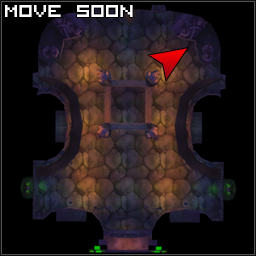
<style>
.page{position:relative;width:256px;height:256px;background:#000000}
.page>*{position:absolute;margin:0}
.t1{font:24px "VisitorTT1BRK";color:#ffffff}
</style>
<div class="page">
<p class="t1" style="left:5px;top:5px;width:128px;height:12px">MOVE SOON</p>
</div>
